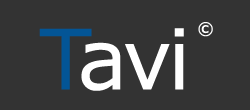
<style>
.page{position:relative;width:250px;height:110px;background:#333333}
.page>*{position:absolute;margin:0}
.t1{font:83.3px "MSReferenceSansSerif";letter-spacing:-0.05em;color:#ffffff}
.t2{font:83.3px "MSReferenceSansSerif";letter-spacing:-0.05em;color:#035596}
.t3{font:16.7px "MSReferenceSansSerif";letter-spacing:-0.05em;color:#ffffff}
</style>
<div class="page">
<p class="t1" style="left:39px;top:28px;width:145px;height:63px"><span class="t2">T</span>avi</p>
<p class="t3" style="left:198px;top:22px;width:15px;height:15px">©️</p>
</div>
